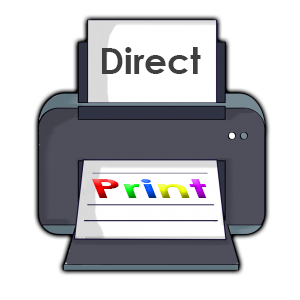
<style>
.page{position:relative;width:300px;height:300px;background:#ffffff}
.page>*{position:absolute;margin:0}
.t1{font:35.7px "CenturyGothic-Bold";color:#3f3f3f}
.t2{font:29.1px "CenturyGothic-Bold";scale:1.98 1}
</style>
<div class="page">
<p class="t1" style="left:102px;top:47px;width:99px;height:27px">Direct</p>
<p class="t2" style="left:92px;top:179px;width:115px;height:19px">Print</p>
</div>
